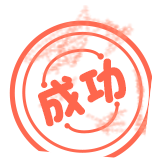
<style>
.page{position:relative;width:160px;height:165px;background:#ffffff}
.page>*{position:absolute;margin:0}
.t1{font:50.3px "AaMianHuatang";color:#fe664d}
</style>
<div class="page">
<p class="t1" style="left:38px;top:58px;width:88px;height:69px;rotate:-22deg">成功</p>
</div>
